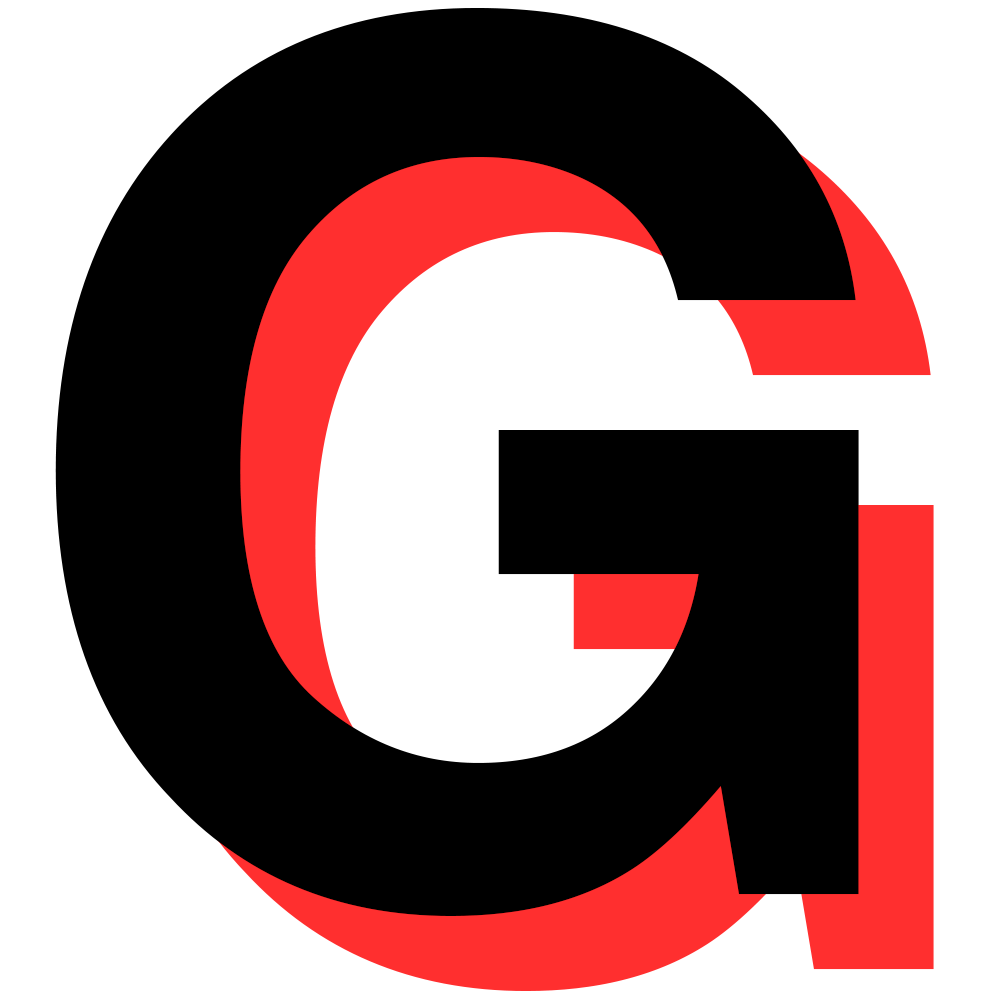
<style>
.page{position:relative;width:1000px;height:1000px;background:#ffffff}
.page>*{position:absolute;margin:0}
.t1{font:1200px "Helvetica-Bold";letter-spacing:0.02em;color:#000000}
.t2{font:1200px "Helvetica-Bold";letter-spacing:0.02em}
</style>
<div class="page">
<p class="t1" style="left:55px;top:8px;width:804px;height:908px">G</p>
<p class="t2" style="left:130px;top:83px;width:804px;height:908px">G</p>
</div>
